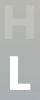
<style>
.page{position:relative;width:40px;height:100px}
.page>*{position:absolute;margin:0}
.t1{font:48px "SegoeUI-Bold";color:#c2c2bd}
.t2{font:48px "SegoeUI-Bold";color:#ffffff}
</style>
<div class="page">
<p class="t1" style="left:4px;top:5px;width:30px;height:34px">H</p>
<p class="t2" style="left:10px;top:56px;width:21px;height:34px;opacity:0.15">L</p>
<p class="t2" style="left:10px;top:56px;width:21px;height:34px">L</p>
</div>
